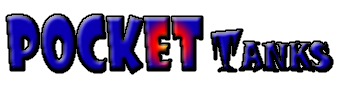
<style>
.page{position:relative;width:340px;height:85px;background:#ffffff}
.page>*{position:absolute;margin:0}
.t1{font:71px "ShowcardGothic-Reg";letter-spacing:0.02em;scale:0.7 1}
.t2{font:54.5px "SnapITC-Regular";letter-spacing:0.02em;font-variant:small-caps;scale:0.69 1}
</style>
<div class="page">
<p class="t1" style="left:7px;top:15px;width:325px;height:58px">pocket <span class="t2">Tanks</span></p>
</div>
